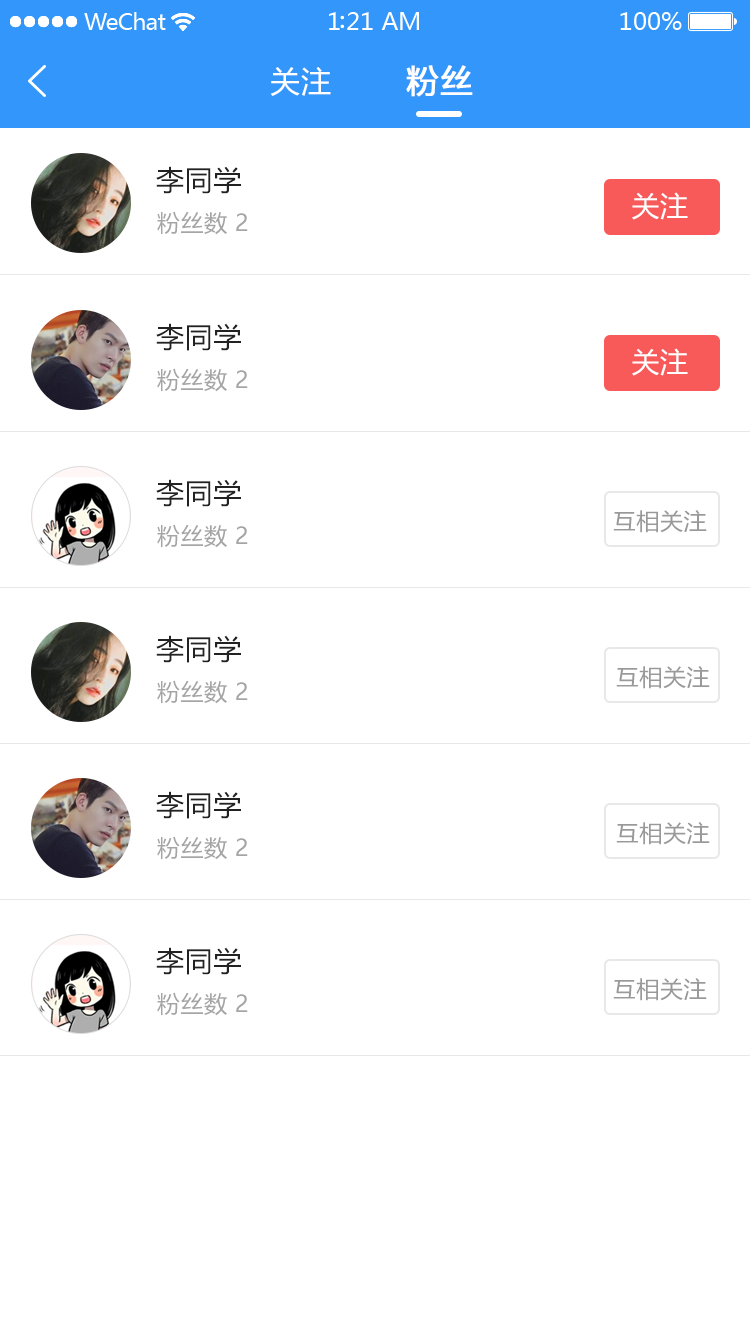
<style>
.page{position:relative;width:750px;height:1334px;background:#ffffff}
.page>*{position:absolute;margin:0}
.t1{font:32px "MicrosoftYaHei";letter-spacing:0.025em;color:#ffffff;font-weight:bold}
.t2{font:30px "MicrosoftYaHei";letter-spacing:0.025em;color:#ffffff}
.t3{font:28px "MicrosoftYaHei";letter-spacing:0.025em;color:#222222}
.t4{font:28px "MicrosoftYaHei";letter-spacing:0.025em;color:#ffffff}
.t5{font:23px "MicrosoftYaHei";letter-spacing:0.025em;color:#999999}
</style>
<div class="page">
<p class="t1" style="left:406px;top:65px;width:67px;height:32px">粉丝</p>
<p class="t2" style="left:270px;top:67px;width:61px;height:29px">关注</p>
<p class="t3" style="left:156px;top:166px;width:85px;height:28px">李同学</p>
<p class="t4" style="left:632px;top:192px;width:56px;height:28px">关注</p>
<p class="t5" style="left:157px;top:211px;width:91px;height:24px;opacity:0.9">粉丝数 2</p>
<p class="t3" style="left:156px;top:323px;width:85px;height:28px">李同学</p>
<p class="t4" style="left:632px;top:348px;width:56px;height:28px">关注</p>
<p class="t5" style="left:157px;top:368px;width:91px;height:24px;opacity:0.9">粉丝数 2</p>
<p class="t3" style="left:156px;top:479px;width:85px;height:28px">李同学</p>
<p class="t5" style="left:613px;top:510px;width:94px;height:23px">互相关注</p>
<p class="t5" style="left:157px;top:524px;width:91px;height:24px;opacity:0.9">粉丝数 2</p>
<p class="t3" style="left:156px;top:635px;width:85px;height:28px">李同学</p>
<p class="t5" style="left:616px;top:666px;width:94px;height:23px">互相关注</p>
<p class="t5" style="left:157px;top:680px;width:91px;height:24px;opacity:0.9">粉丝数 2</p>
<p class="t3" style="left:156px;top:791px;width:85px;height:28px">李同学</p>
<p class="t5" style="left:616px;top:822px;width:94px;height:23px">互相关注</p>
<p class="t5" style="left:157px;top:836px;width:91px;height:24px;opacity:0.9">粉丝数 2</p>
<p class="t3" style="left:156px;top:947px;width:85px;height:28px">李同学</p>
<p class="t5" style="left:613px;top:978px;width:94px;height:23px">互相关注</p>
<p class="t5" style="left:157px;top:992px;width:91px;height:24px;opacity:0.9">粉丝数 2</p>
</div>
